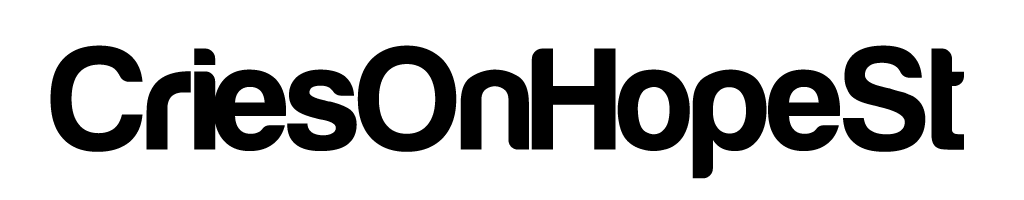
<style>
.page{position:relative;width:1024px;height:200px;background:#ffffff}
.page>*{position:absolute;margin:0}
.t1{font:150px "Harabara-Bold";color:#000000}
</style>
<div class="page">
<p class="t1" style="left:50px;top:45px;width:914px;height:134px">CriesOnHopeSt</p>
</div>
